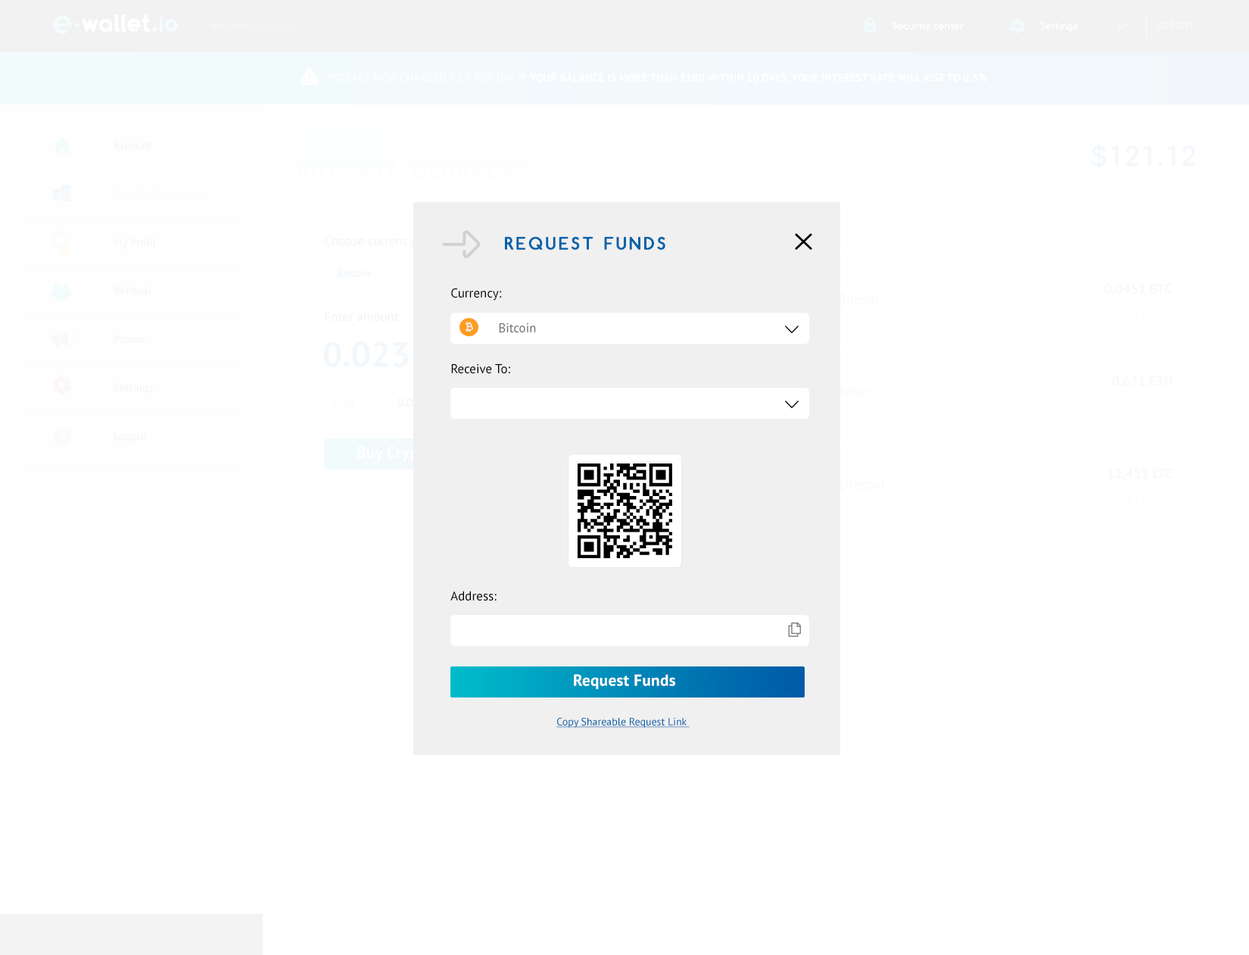
<style>
.page{position:relative;width:1249px;height:955px;background:#ffffff}
.page>*{position:absolute;margin:0}
.t1{font:12.9px/75.7px "PTSans-Regular";color:#f2f2f2}
.t2{font:17.4px "Comfortaa-Bold";letter-spacing:0.18em;color:#0062aa;text-transform:uppercase;font-weight:bold}
.t3{font:11.4px "PTSans-Bold";color:#f2f7fb}
.t4{font:12.9px/75.7px "PTSans-Regular";color:#000000}
.t5{font:12.9px "PTSans-Regular";color:#737373}
.t6{font:11.4px "PTSans-Bold";color:#f0f0f0}
.t7{font:15.9px "PTSans-Bold";letter-spacing:0.02em;color:#ffffff}
.t8{font:10.6px "PTSans-Regular";color:#0062aa;text-decoration:underline}
</style>
<div class="page">
<p class="t1" style="left:325px;top:235px;width:92px;height:86px">Choose currency:<br>Enter amount:</p>
<p class="t2" style="left:505px;top:236px;width:160px;height:14px">Request Funds</p>
<p class="t3" style="left:338px;top:269px;width:32px;height:8px">Bitcoin</p>
<p class="t4" style="left:450px;top:288px;width:60px;height:312px">Currency:<br>Receive To:<br><br><br>Address:</p>
<p class="t5" style="left:499px;top:322px;width:37px;height:10px">Bitcoin</p>
<p class="t6" style="left:397px;top:398px;width:35px;height:9px">0.0001</p>
<p class="t7" style="left:357px;top:446px;width:137px;height:15px">Buy Cryptocurrency</p>
<p class="t7" style="left:574px;top:674px;width:101px;height:15px">Request Funds</p>
<p class="t8" style="left:556px;top:717px;width:134px;height:11px">Copy Shareable Request Link</p>
</div>
